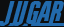
<style>
.page{position:relative;width:64px;height:27px;background:#226aac}
.page>*{position:absolute;margin:0}
.t1{font:28.3px "RadiumCorp";color:#226aac;scale:1.17 1}
</style>
<div class="page">
<p class="t1" style="left:0px;top:1px;width:65px;height:25px">JUGAR</p>
</div>
